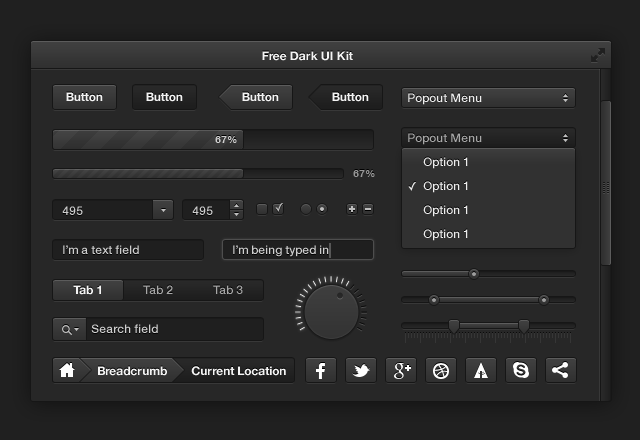
<style>
.page{position:relative;width:640px;height:440px;background:#272727}
.page>*{position:absolute;margin:0}
.t1{font:12px "HelveticaNeue-Bold";color:#f4f4f4}
.t2{font:12px "HelveticaNeue-Medium";color:#eeeeee}
.t3{font:10px "HelveticaNeue-Bold";color:#cfcfcf}
.t4{font:12px "HelveticaNeue-Medium";color:#a8a8a8}
.t5{font:12px/24px "HelveticaNeue-Medium";color:#eeeeee}
.t6{font:10px "HelveticaNeue-Bold";color:#989898}
.t7{font:12px "HelveticaNeue-Medium";color:#cfcfcf}
</style>
<div class="page">
<p class="t1" style="left:262px;top:51px;width:91px;height:10px">Free Dark UI Kit</p>
<p class="t1" style="left:66px;top:92px;width:37px;height:10px">Button</p>
<p class="t1" style="left:146px;top:92px;width:37px;height:10px">Button</p>
<p class="t1" style="left:242px;top:92px;width:37px;height:10px">Button</p>
<p class="t1" style="left:332px;top:92px;width:37px;height:10px">Button</p>
<p class="t2" style="left:408px;top:93px;width:74px;height:12px">Popout Menu</p>
<p class="t3" style="left:215px;top:136px;width:22px;height:7px">67%</p>
<p class="t4" style="left:408px;top:133px;width:74px;height:12px">Popout Menu</p>
<p class="t5" style="left:423px;top:157px;width:45px;height:84px">Option 1<br>Option 1<br>Option 1<br>Option 1</p>
<p class="t6" style="left:353px;top:170px;width:22px;height:7px">67%</p>
<p class="t7" style="left:62px;top:206px;width:21px;height:9px">495</p>
<p class="t7" style="left:192px;top:206px;width:21px;height:9px">495</p>
<p class="t7" style="left:63px;top:245px;width:76px;height:9px">I’m a text field</p>
<p class="t7" style="left:233px;top:245px;width:96px;height:12px">I’m being typed in</p>
<p class="t1" style="left:73px;top:285px;width:28px;height:10px">Tab 1</p>
<p class="t4" style="left:143px;top:285px;width:30px;height:9px">Tab 2</p>
<p class="t4" style="left:213px;top:285px;width:30px;height:9px">Tab 3</p>
<p class="t7" style="left:91px;top:324px;width:67px;height:9px">Search field</p>
<p class="t1" style="left:98px;top:366px;width:69px;height:10px">Breadcrumb</p>
<p class="t1" style="left:191px;top:366px;width:95px;height:10px">Current Location</p>
</div>
